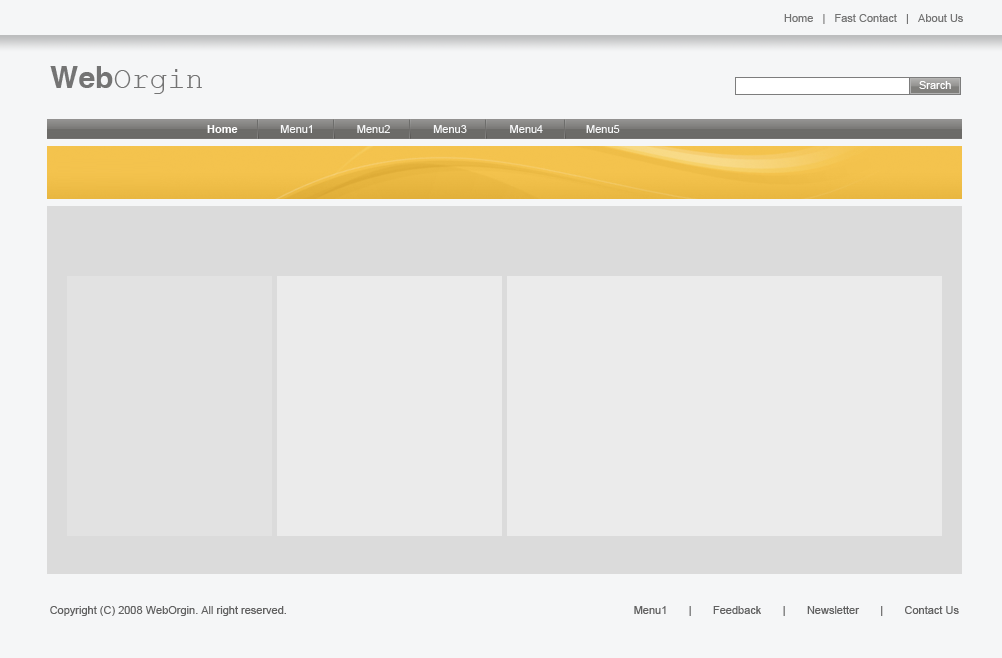
<style>
.page{position:relative;width:1002px;height:658px;background:#f5f6f7}
.page>*{position:absolute;margin:0}
.t1{font:11px "ArialMT";color:#747474}
.t2{font:30px "CourierNewPSMT";color:#747474}
.t3{font:30px "Helvetica-Bold";color:#747474}
.t4{font:11px "ArialMT";color:#ffffff}
.t5{font:11px "ArialMT";color:#f5f6f7}
.t6{font:11px "Arial-BoldMT";color:#ffffff}
.t7{font:11px "ArialMT";color:#616161}
</style>
<div class="page">
<p class="t1" style="left:784px;top:14px;width:179px;height:10px">Home   |   Fast Contact   |   About Us</p>
<p class="t2" style="left:50px;top:66px;width:152px;height:28px"><span class="t3">Web</span>Orgin</p>
<p class="t4" style="left:919px;top:81px;width:32px;height:8px">Srarch</p>
<p class="t5" style="left:207px;top:125px;width:413px;height:8px"><span class="t6">Home</span>              Menu1              Menu2              Menu3              Menu4              Menu5</p>
<p class="t7" style="left:50px;top:606px;width:236px;height:10px">Copyright (C) 2008 WebOrgin. All right reserved.</p>
<p class="t7" style="left:634px;top:606px;width:325px;height:10px">Menu1       |       Feedback       |       Newsletter       |       Contact Us</p>
</div>
